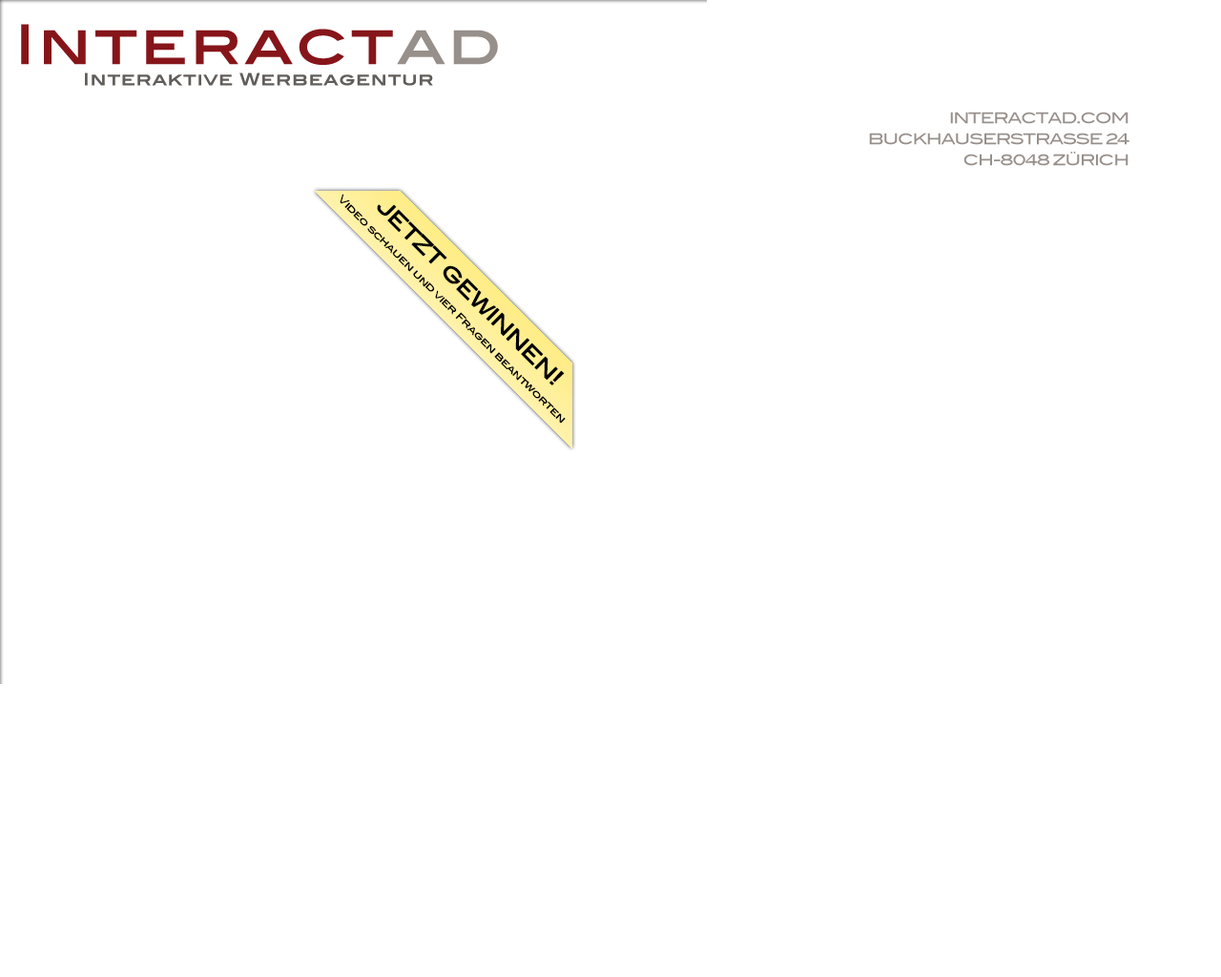
<style>
.page{position:relative;width:1221px;height:977px;background:#ffffff}
.page>*{position:absolute;margin:0}
.t1{font:16.3px/21px "BlairMdITCTTMedium";letter-spacing:0.025em;color:#615d5a;font-weight:bold;scale:1.05 1}
.t2{font:54.4px/21px "BlairMdITCTTMedium";letter-spacing:0.025em;color:#86151a;font-weight:bold;scale:1.05 1}
.t3{font:54.4px/21px "BlairMdITCTTMedium";letter-spacing:0.025em;color:#978f8a;font-weight:bold;scale:1.05 1}
.t4{font:14.5px/21px "BlairMdITCTTMedium";letter-spacing:-0.075em;color:#978f8a;text-transform:uppercase;scale:1.05 1}
.t5{font:10px/21px "BlairMdITCTTMedium";letter-spacing:-0.075em;color:#000000;font-weight:bold;scale:1.05 1}
.t6{font:19.9px/21px "BlairMdITCTTMedium";letter-spacing:-0.075em;color:#000000;text-transform:uppercase;font-weight:bold;scale:1.05 1}
.t7{font:21.7px/21px "BlairMdITCTTMedium";letter-spacing:-0.075em;color:#000000;text-transform:uppercase;font-weight:bold;scale:1.05 1}
</style>
<div class="page">
<p class="t1" style="left:21px;top:24px;width:477px;height:62px;text-align:center"><span class="t2">Interact</span><span class="t3">ad<br></span>Interaktive Werbeagentur</p>
<p class="t4" style="left:869px;top:112px;width:260px;height:54px;text-align:right">Interactad.com<br>Buckhauserstrasse 24<br>ch-8048 zürich</p>
<p class="t5" style="left:340px;top:194px;width:226px;height:229px;text-align:center;rotate:45deg"><span class="t6">jetzt gewinnen</span><span class="t7">!<br></span>Video schauen und vier Fragen beantworten</p>
</div>
